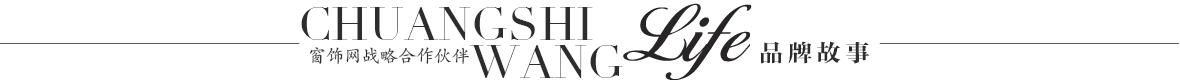
<style>
.page{position:relative;width:1180px;height:84px;background:#ffffff}
.page>*{position:absolute;margin:0}
.t1{font:45.8px "Didot";color:#2e2c2d}
.t2{font:24px "FZCYSK--GBK1-0";letter-spacing:0.2em;color:#2e2c2d}
.t3{font:18px "FZKTJW--GB1-0";color:#2e2c2d}
</style>
<div class="page">
<p class="t1" style="left:301px;top:7px;width:292px;height:33px">CHUANGSHI</p>
<p class="t2" style="left:761px;top:41px;width:109px;height:23px">品牌故事</p>
<p class="t3" style="left:310px;top:47px;width:159px;height:18px">窗饰网战略合作伙伴</p>
<p class="t1" style="left:469px;top:45px;width:154px;height:33px">WANG</p>
</div>
